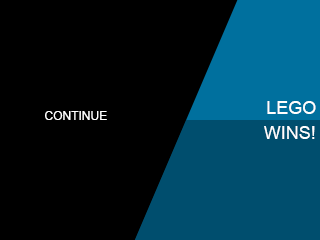
<style>
.page{position:relative;width:320px;height:240px;background:#000000}
.page>*{position:absolute;margin:0}
.t1{font:18px "ArialUnicodeMS";color:#ffffff}
.t2{font:12px "ArialUnicodeMS";color:#ffffff}
</style>
<div class="page">
<p class="t1" style="left:267px;top:101px;width:49px;height:13px">LEGO</p>
<p class="t2" style="left:45px;top:111px;width:62px;height:9px">CONTINUE</p>
<p class="t1" style="left:264px;top:126px;width:51px;height:13px">WINS!</p>
</div>
